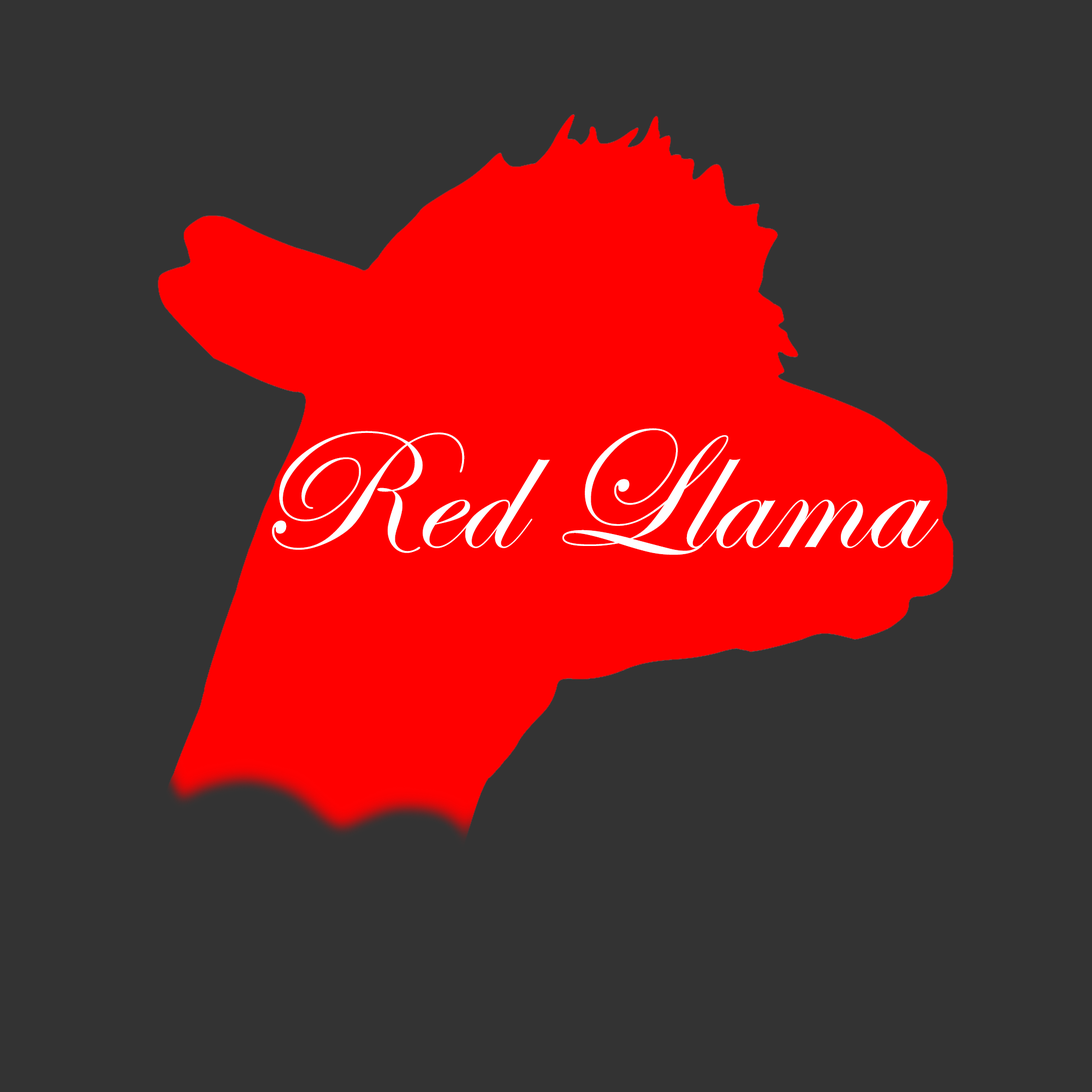
<style>
.page{position:relative;width:1092px;height:1092px;background:#333333}
.page>*{position:absolute;margin:0}
.t1{font:174.4px "EdwardianScriptITC";color:#ffffff}
</style>
<div class="page">
<p class="t1" style="left:272px;top:428px;width:667px;height:127px">Red Llama</p>
</div>
